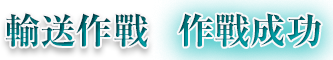
<style>
.page{position:relative;width:333px;height:60px}
.page>*{position:absolute;margin:0}
.t1{font:36px "RyuminPr6N-ExBold";letter-spacing:0.01em}
</style>
<div class="page">
<p class="t1" style="left:5px;top:13px;width:143px;height:34px">輸送作戰</p>
<p class="t1" style="left:178px;top:13px;width:143px;height:34px">作戰成功</p>
</div>
